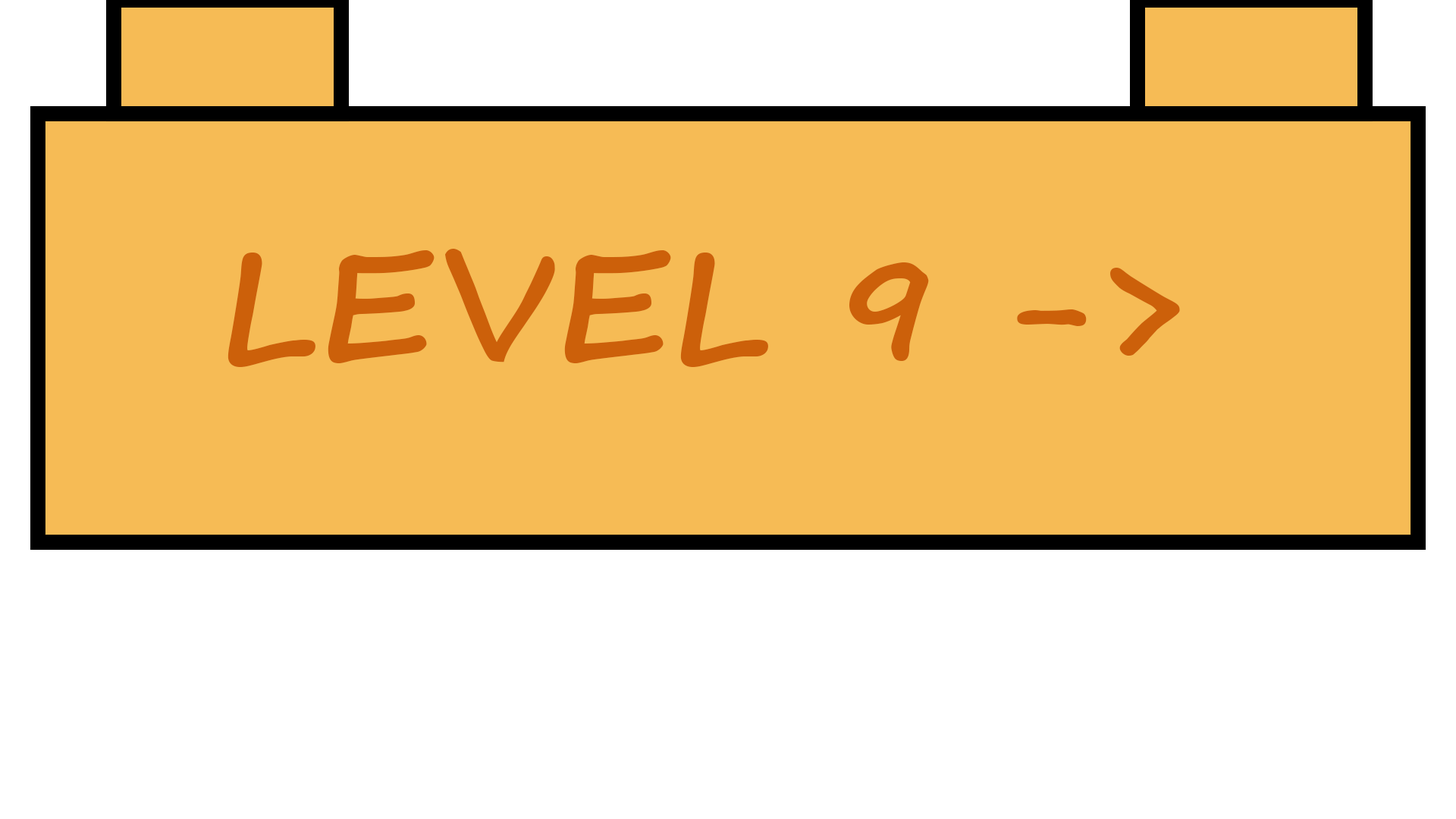
<style>
.page{position:relative;width:1456px;height:819px;background:#f6bb55}
.page>*{position:absolute;margin:0}
.t1{font:151.7px "SegoeScript-Bold";color:#cc600a;text-transform:uppercase}
</style>
<div class="page">
<p class="t1" style="left:227px;top:249px;width:953px;height:118px">Level 9 -&gt;</p>
</div>
